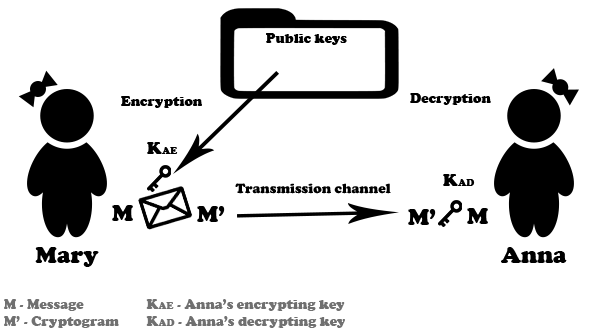
<style>
.page{position:relative;width:600px;height:335px;background:#ffffff}
.page>*{position:absolute;margin:0}
.t1{font:14px "CooperBlack";color:#000000}
.t2{font:10px "CooperBlack";color:#000000}
.t3{font:18px "CooperBlack";color:#000000}
.t4{font:24px "CooperBlack";color:#000000}
.t5{font:14px "CooperBlack";color:#707070}
.t6{font:10px "CooperBlack";color:#707070}
</style>
<div class="page">
<p class="t1" style="left:266px;top:33px;width:81px;height:12px">Public keys</p>
<p class="t1" style="left:121px;top:96px;width:81px;height:12px">Encryption</p>
<p class="t2" style="left:147px;top:142px;width:31px;height:12px"><span class="t3">K</span>AE</p>
<p class="t2" style="left:443px;top:174px;width:32px;height:12px"><span class="t3">K</span>AD</p>
<p class="t1" style="left:235px;top:183px;width:156px;height:11px">Transmission channel</p>
<p class="t4" style="left:112px;top:205px;width:21px;height:16px">M</p>
<p class="t4" style="left:197px;top:206px;width:28px;height:16px">M’</p>
<p class="t4" style="left:408px;top:209px;width:28px;height:16px">M’</p>
<p class="t4" style="left:467px;top:208px;width:21px;height:16px">M</p>
<p class="t4" style="left:35px;top:247px;width:64px;height:20px">Mary</p>
<p class="t4" style="left:501px;top:247px;width:66px;height:16px">Anna</p>
<p class="t5" style="left:4px;top:299px;width:115px;height:29px">M - Message<br>M’ - Cryptogram</p>
<p class="t5" style="left:146px;top:299px;width:199px;height:29px">K<span class="t6">AE</span> - Anna’s encrypting key<br>K<span class="t6">AD</span> - Anna’s decrypting key</p>
</div>
